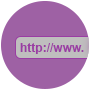
<style>
.page{position:relative;width:90px;height:90px;background:#9e61a4}
.page>*{position:absolute;margin:0}
.t1{font:12px "Arial-BoldMT";color:#9a3da3}
</style>
<div class="page">
<p class="t1" style="left:20px;top:43px;width:64px;height:11px">http://www.</p>
</div>
